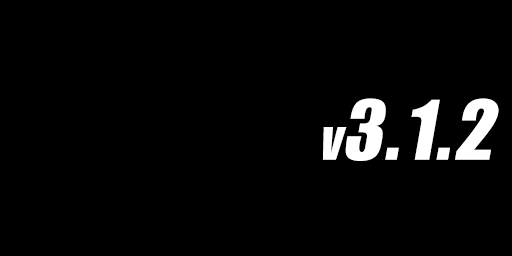
<style>
.page{position:relative;width:512px;height:256px;background:#000000}
.page>*{position:absolute;margin:0}
.t1{font:84px "Genuine";color:#ffffff;font-style:italic}
.t2{font:56px "Genuine";color:#ffffff;font-style:italic}
</style>
<div class="page">
<p class="t1" style="left:322px;top:98px;width:177px;height:63px"><span class="t2">v</span>3.1.2</p>
</div>
